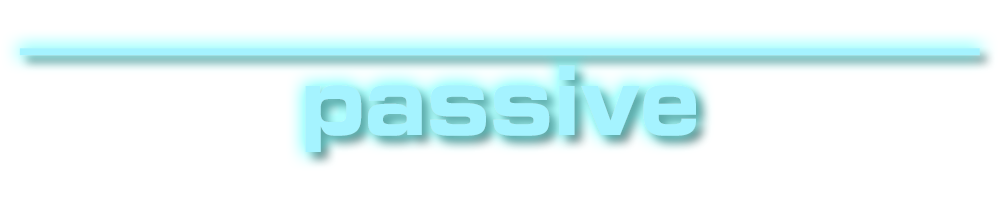
<style>
.page{position:relative;width:1000px;height:200px;background:#ffffff}
.page>*{position:absolute;margin:0}
.t1{font:96px "LucidaGrande";color:#a5f3ff;scale:0.83 1}
.t2{font:96px "EurostileLTStd-BoldEx2";color:#a5f3ff;scale:0.83 1}
</style>
<div class="page">
<p class="t1" style="left:19px;top:48px;width:961px;height:104px;text-align:center">________________________<br><span class="t2">passive</span></p>
</div>
